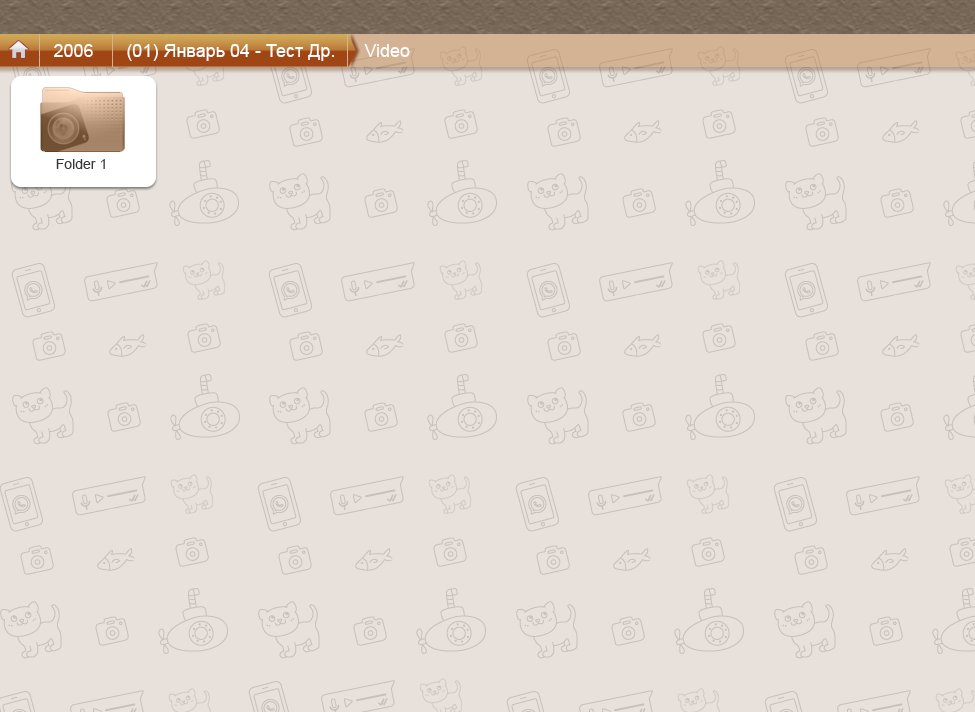
<style>
.page{position:relative;width:975px;height:712px;background:#e8e1db}
.page>*{position:absolute;margin:0}
.t1{font:18px "ArialMT";color:#ffffff}
.t2{font:14px "ArialMT";color:#393736}
</style>
<div class="page">
<p class="t1" style="left:54px;top:44px;width:39px;height:13px">2006</p>
<p class="t1" style="left:127px;top:44px;width:207px;height:17px">(01) Январь 04 - Тест Др.</p>
<p class="t1" style="left:364px;top:44px;width:46px;height:13px">Video</p>
<p class="t2" style="left:56px;top:159px;width:49px;height:10px">Folder 1</p>
</div>
